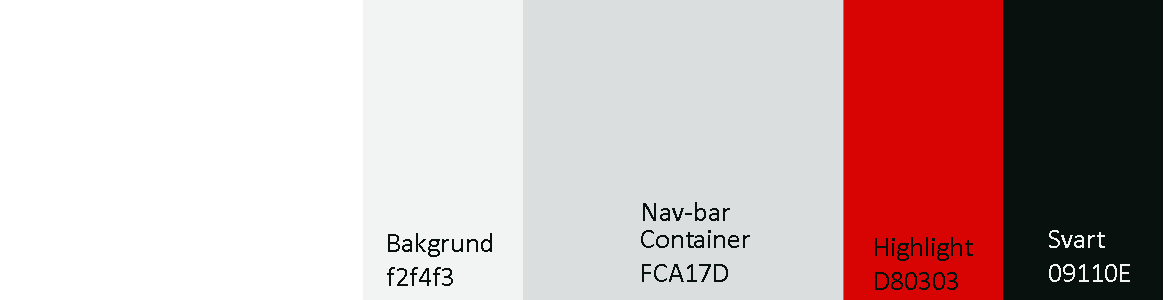
<style>
.page{position:relative;width:1168px;height:300px;background:#ffffff}
.page>*{position:absolute;margin:0}
.t1{font:28px "Calibri";color:#09110e}
.t2{font:28px "Calibri";color:#f2f4f3}
</style>
<div class="page">
<p class="t1" style="left:643px;top:202px;width:87px;height:19px">Nav-bar</p>
<p class="t1" style="left:387px;top:233px;width:105px;height:53px">Bakgrund<br>f2f4f3</p>
<p class="t1" style="left:641px;top:230px;width:109px;height:52px">Container<br>FCA17D</p>
<p class="t2" style="left:1049px;top:230px;width:81px;height:52px">Svart<br>09110E</p>
<p class="t1" style="left:875px;top:237px;width:98px;height:53px">Highlight<br>D80303</p>
</div>
